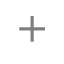
<style>
.page{position:relative;width:64px;height:64px;background:#ffffff}
.page>*{position:absolute;margin:0}
.t1{font:60px "Courier";color:#7f7f7f}
</style>
<div class="page">
<p class="t1" style="left:19px;top:16px;width:26px;height:26px">+</p>
</div>
